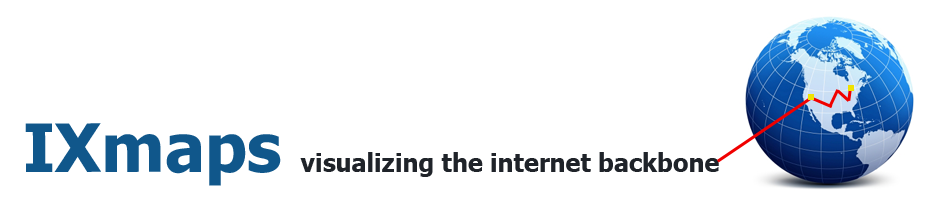
<style>
.page{position:relative;width:930px;height:200px;background:#ffffff}
.page>*{position:absolute;margin:0}
.t1{font:66.7px "Tahoma-Bold";color:#10578b}
.t2{font:25px "Tahoma-Bold";color:#1f2329}
</style>
<div class="page">
<p class="t1" style="left:25px;top:123px;width:256px;height:63px">IXmaps</p>
<p class="t2" style="left:300px;top:152px;width:419px;height:25px">visualizing the internet backbone</p>
</div>
